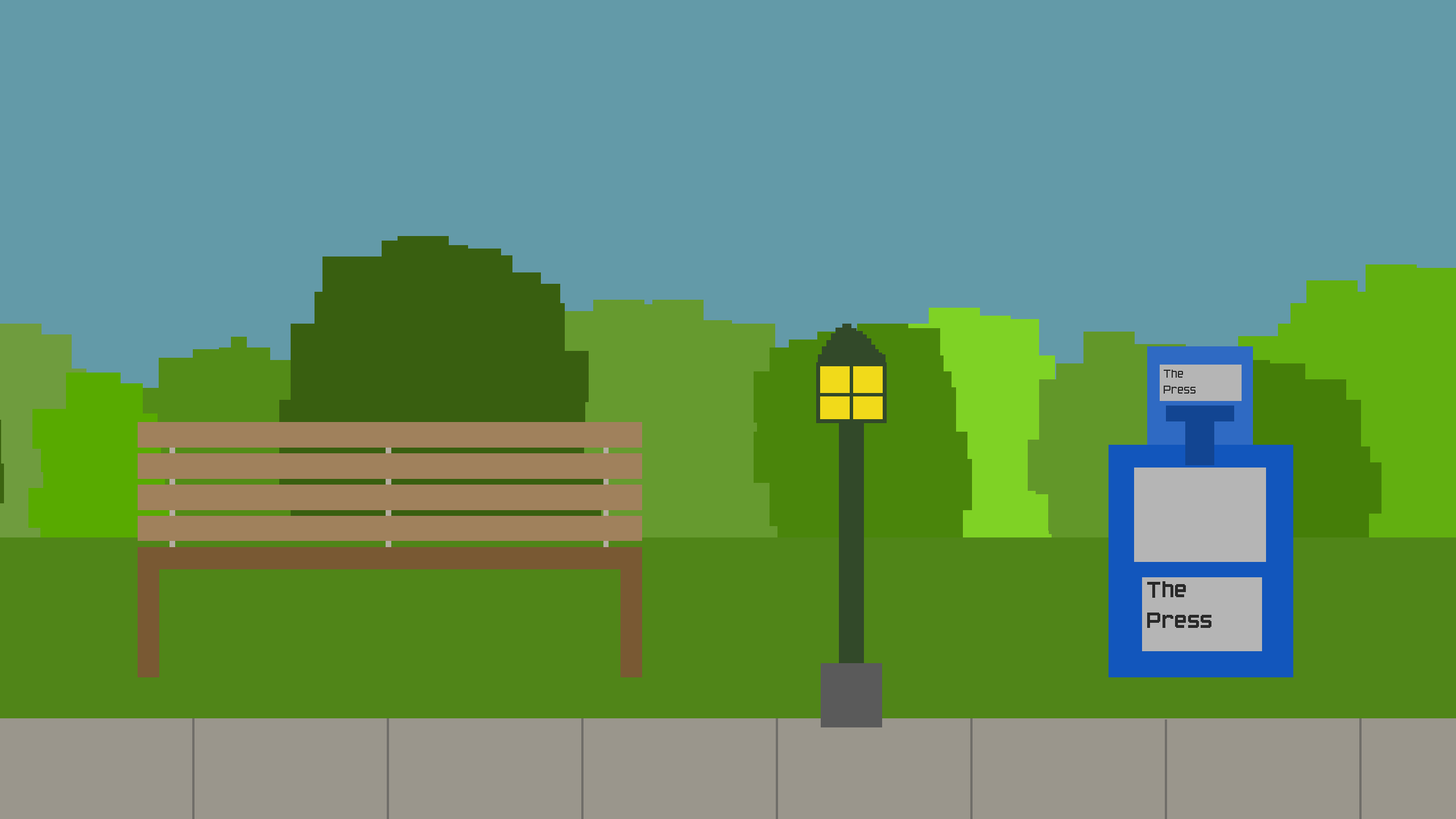
<style>
.page{position:relative;width:1456px;height:819px;background:#639aa8}
.page>*{position:absolute;margin:0}
.t1{font:13.7px "PixelFont-7";color:#292929}
.t2{font:25.6px "PixelFont-7";color:#292929}
</style>
<div class="page">
<p class="t1" style="left:1164px;top:370px;width:31px;height:24px">The<br>Press</p>
<p class="t2" style="left:1147px;top:581px;width:64px;height:47px">The<br>Press</p>
</div>
